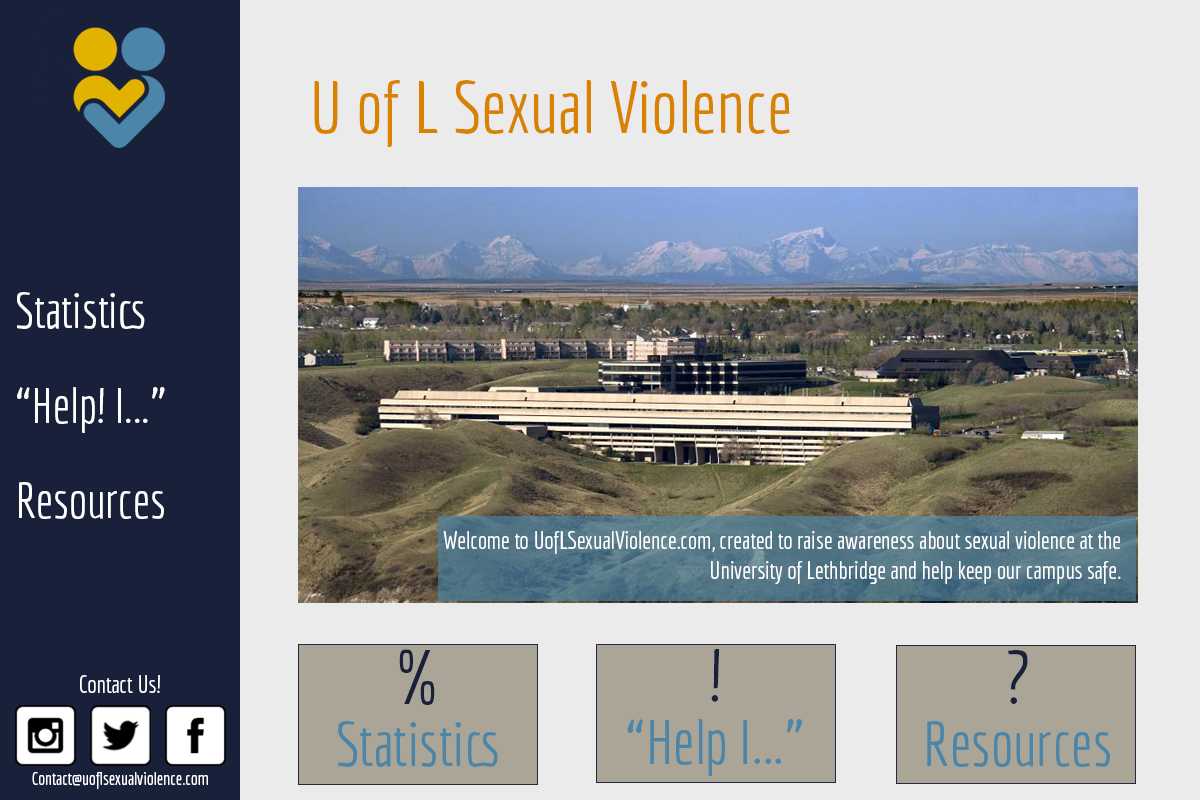
<style>
.page{position:relative;width:1200px;height:800px;background:#ebebeb}
.page>*{position:absolute;margin:0}
.t1{font:72px "Economica-Regular";color:#d98100}
.t2{font:48px/95px "Economica-Regular";color:#ffffff}
.t3{font:60px/95px "Economica-Regular";color:#ffffff}
.t4{font:24px/30px "Economica-Regular";color:#ffffff}
.t5{font:61.7px/61.7px "Economica-Regular";color:#4b85a8}
.t6{font:74px/49.4px "Economica-Regular";color:#182139}
.t7{font:24px "Economica-Regular";color:#ffffff}
.t8{font:18px "Economica-Regular";color:#ffffff}
</style>
<div class="page">
<p class="t1" style="left:314px;top:80px;width:476px;height:67px">U of L Sexual Violence</p>
<p class="t2" style="left:17px;top:292px;width:148px;height:227px;text-align:center"><span class="t3"><br></span>Statistics<br>“Help! I...”<br>Resources</p>
<p class="t4" style="left:443px;top:531px;width:678px;height:53px;text-align:right">Welcome to UofLSexualViolence.com, created to raise awareness about sexual violence at the University of Lethbridge and help keep our campus safe.</p>
<p class="t5" style="left:338px;top:649px;width:160px;height:118px;text-align:center"><span class="t6">%<br></span>Statistics</p>
<p class="t5" style="left:627px;top:649px;width:175px;height:127px;text-align:center"><span class="t6">!<br></span>“Help I...”</p>
<p class="t5" style="left:927px;top:650px;width:183px;height:117px;text-align:center"><span class="t6">?<br></span>Resources</p>
<p class="t7" style="left:80px;top:675px;width:80px;height:18px">Contact Us!</p>
<p class="t8" style="left:32px;top:772px;width:176px;height:17px">Contact@uoflsexualviolence.com</p>
</div>
